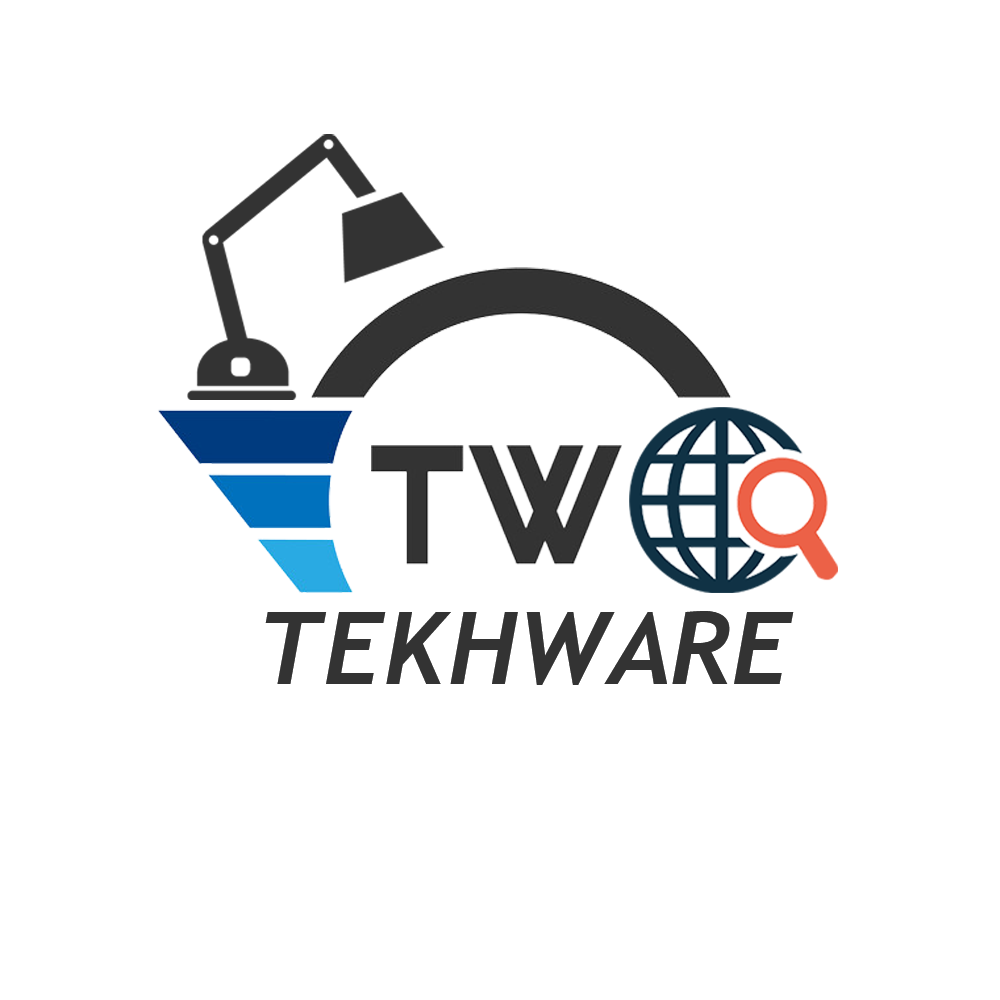
<style>
.page{position:relative;width:1000px;height:1000px;background:#ffffff}
.page>*{position:absolute;margin:0}
.t1{font:99.9px "Trebuchet-BoldItalic";color:#333333}
</style>
<div class="page">
<p class="t1" style="left:265px;top:611px;width:529px;height:74px">TEKHWARE</p>
</div>
